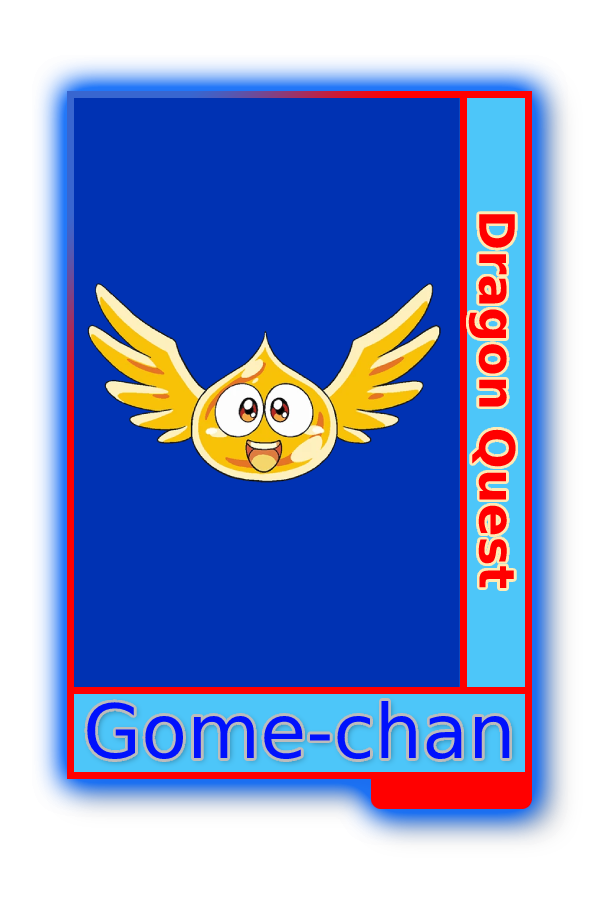
<style>
.page{position:relative;width:600px;height:900px;background:#0032b3}
.page>*{position:absolute;margin:0}
.t1{font:48.8px "MADETOMMY-Bold";color:#ff0000}
.t2{font:75px "CoolveticaRg-Regular";color:#0011fd}
</style>
<div class="page">
<p class="t1" style="left:468px;top:214px;width:48px;height:374px;rotate:90deg">Dragon Quest</p>
<p class="t2" style="left:87px;top:701px;width:423px;height:59px">Gome-chan</p>
</div>
